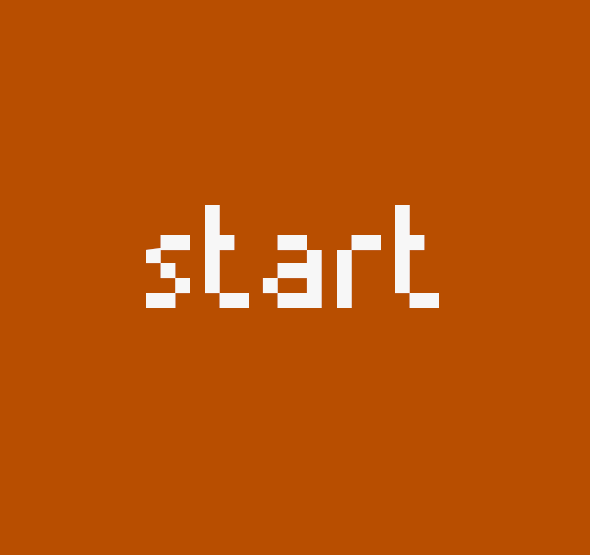
<style>
.page{position:relative;width:590px;height:555px;background:#b84e00}
.page>*{position:absolute;margin:0}
.t1{font:150px "Munro";color:#f7f7f7}
</style>
<div class="page">
<p class="t1" style="left:146px;top:205px;width:293px;height:103px">start</p>
</div>
